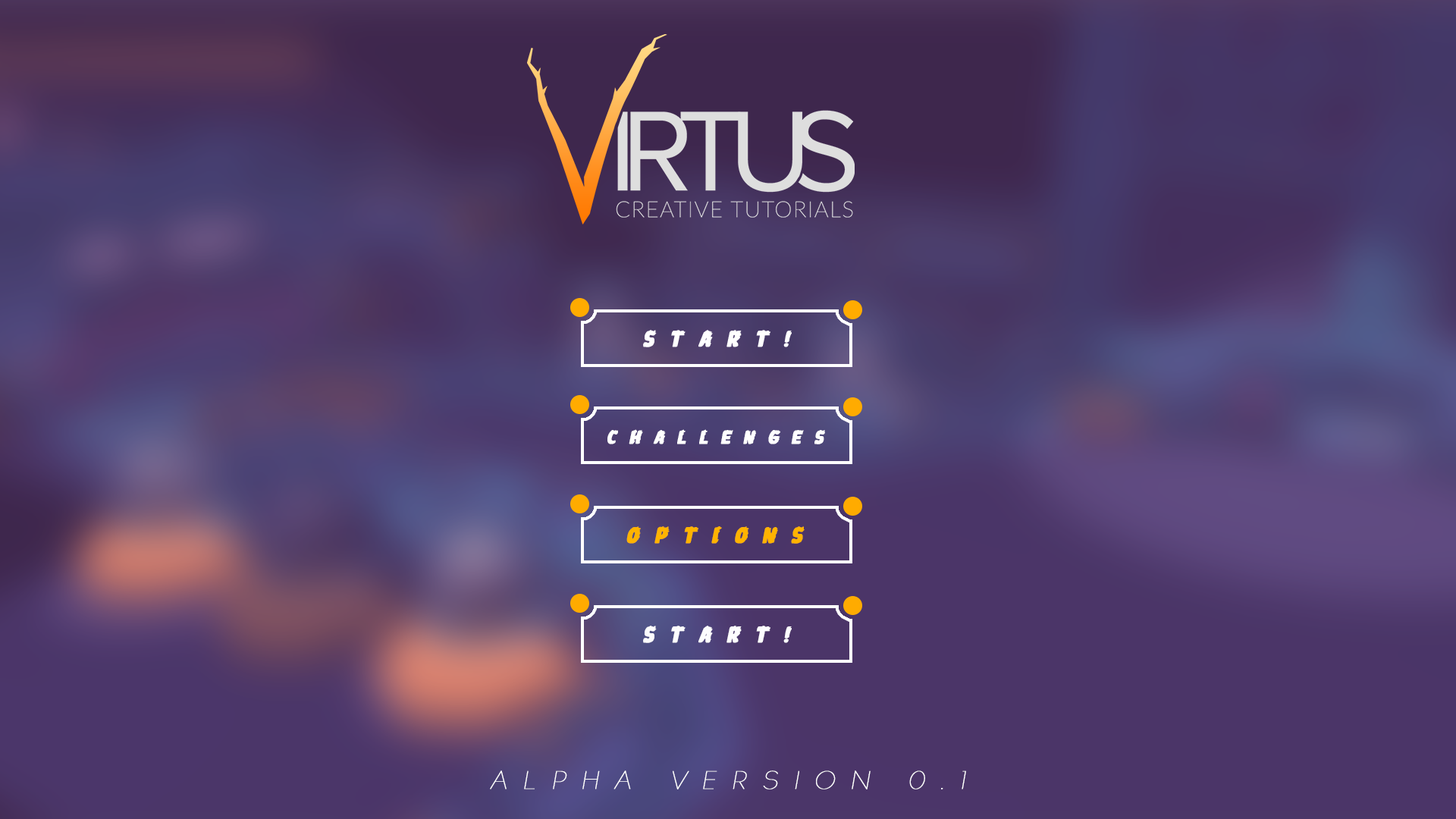
<style>
.page{position:relative;width:1456px;height:819px}
.page>*{position:absolute;margin:0}
.t1{font:19px "JohnnyTorch";letter-spacing:0.67em;color:#ffffff;font-weight:bold;font-style:italic}
.t2{font:22.7px "JohnnyTorch";letter-spacing:0.67em;color:#ffb300;font-weight:bold;font-style:italic}
.t3{font:22.7px "JohnnyTorch";letter-spacing:0.67em;color:#fdfdfe;font-weight:bold;font-style:italic}
.t4{font:22.7px "TYPOGRAPHPRO-UltraLight";letter-spacing:0.67em;color:#ffffff;font-weight:bold;font-style:italic}
</style>
<div class="page">
<p class="t1" style="left:607px;top:429px;width:218px;height:15px">challenges</p>
<p class="t2" style="left:626px;top:526px;width:179px;height:18px">options</p>
<p class="t3" style="left:643px;top:626px;width:149px;height:17px">start!</p>
<p class="t4" style="left:490px;top:770px;width:476px;height:19px">ALPHA VERSION 0.1</p>
</div>
